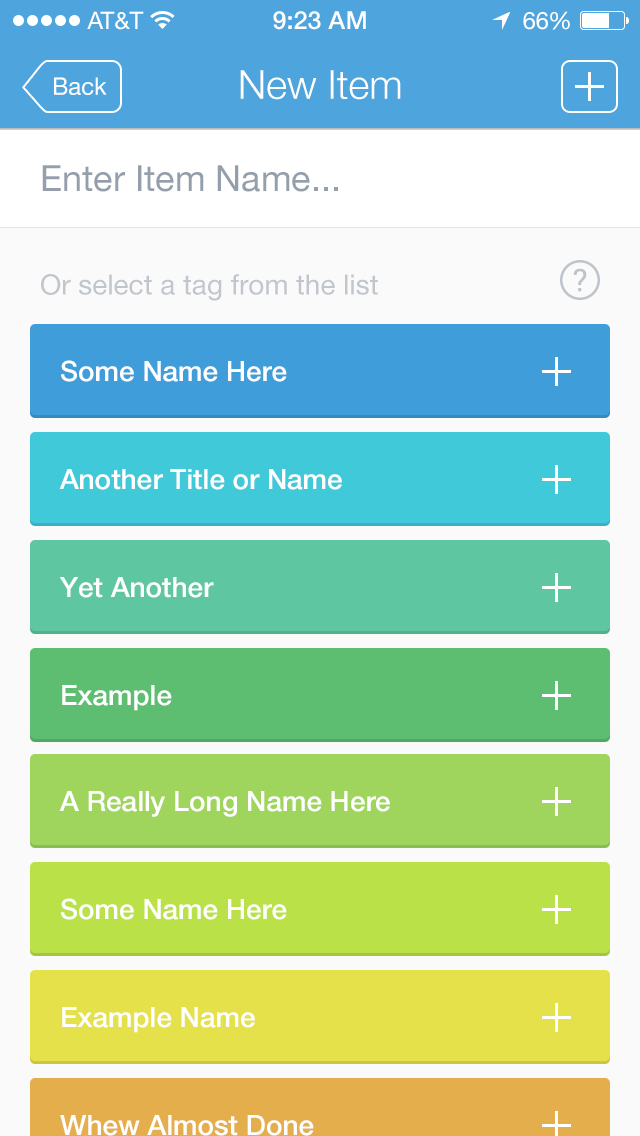
<style>
.page{position:relative;width:640px;height:1136px}
.page>*{position:absolute;margin:0}
.t1{font:24px "HelveticaNeue";color:#ffffff}
.t2{font:25px "HelveticaNeue-Medium";color:#ffffff}
.t3{font:24px "HelveticaNeue";letter-spacing:-0.02em;color:#ffffff}
.t4{font:40px "HelveticaNeue-Light";color:#ffffff}
.t5{font:36px "HelveticaNeue";color:#949fab}
.t6{font:28px "HelveticaNeue";color:#c1c6cd}
.t7{font:28px "HelveticaNeue-Medium";color:#ffffff}
</style>
<div class="page">
<p class="t1" style="left:87px;top:11px;width:57px;height:19px">AT&amp;T</p>
<p class="t2" style="left:273px;top:11px;width:93px;height:19px">9:23 AM</p>
<p class="t1" style="left:523px;top:11px;width:47px;height:19px">6<span class="t3">6</span>%</p>
<p class="t1" style="left:54px;top:77px;width:53px;height:18px">Back</p>
<p class="t4" style="left:240px;top:70px;width:161px;height:30px">New Item</p>
<p class="t5" style="left:42px;top:165px;width:296px;height:27px">Enter Item Name...</p>
<p class="t6" style="left:41px;top:274px;width:337px;height:27px">Or select a tag from the list</p>
<p class="t7" style="left:61px;top:360px;width:226px;height:22px">Some Name Here</p>
<p class="t7" style="left:59px;top:469px;width:283px;height:21px">Another Title or Name</p>
<p class="t7" style="left:59px;top:577px;width:155px;height:21px">Yet Another</p>
<p class="t7" style="left:62px;top:685px;width:110px;height:26px">Example</p>
<p class="t7" style="left:59px;top:791px;width:331px;height:26px">A Really Long Name Here</p>
<p class="t7" style="left:61px;top:898px;width:226px;height:22px">Some Name Here</p>
<p class="t7" style="left:62px;top:1007px;width:193px;height:26px">Example Name</p>
<p class="t7" style="left:60px;top:1115px;width:254px;height:21px">Whew Almost Done</p>
</div>
